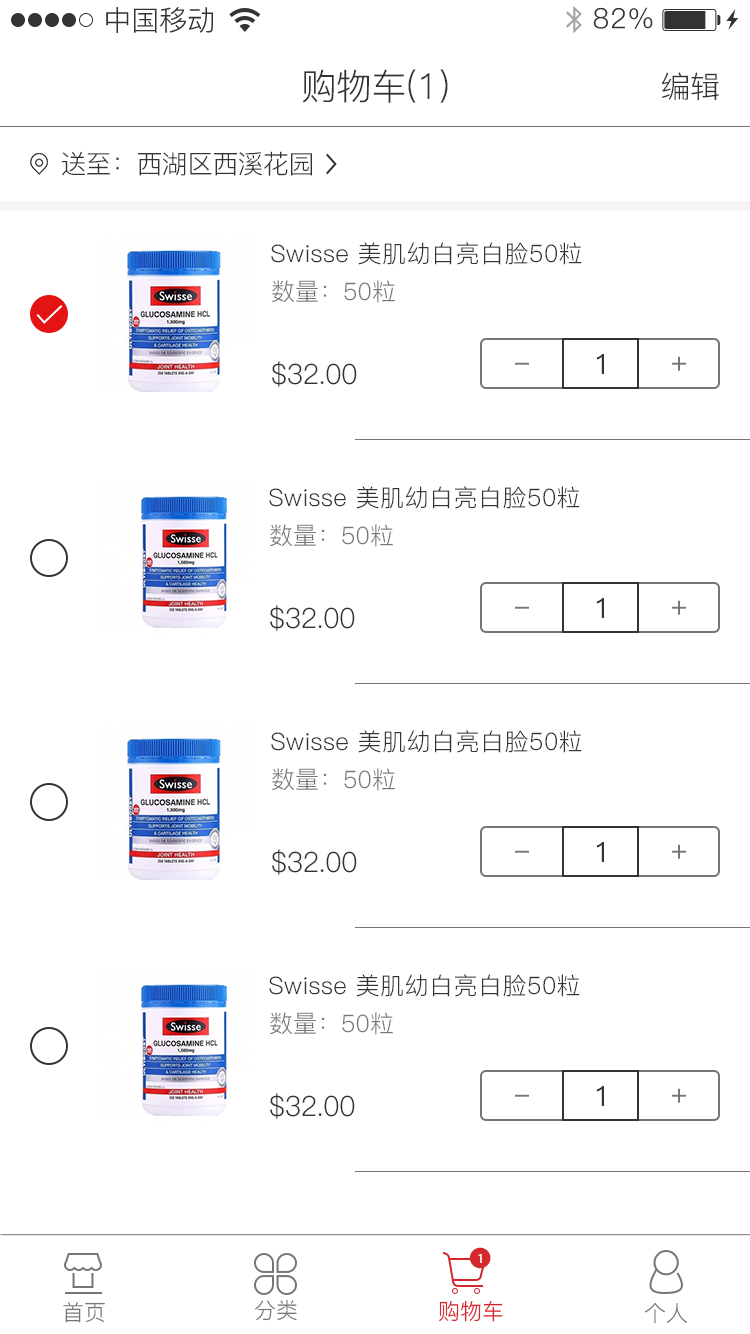
<style>
.page{position:relative;width:750px;height:1334px;background:#ffffff}
.page>*{position:absolute;margin:0}
.t1{font:28px "PingFang-SC-Regular";color:#333333}
.t2{font:28px "PingFang-SC-Regular";letter-spacing:0.025em;color:#333333}
.t3{font:36px "PingFang-SC-Regular";letter-spacing:-0.025em;color:#333333}
.t4{font:30px "PingFang-SC-Regular";letter-spacing:-0.025em;color:#333333}
.t5{font:26px "PingFang-SC-Regular";letter-spacing:-0.025em;color:#333333}
.t6{font:24px "PingFang-SC-Regular";letter-spacing:0.02em;color:#333333}
.t7{font:24px "PingFang-SC-Regular";color:#767676}
.t8{font:28px "PingFang-SC-Regular";letter-spacing:-0.025em;color:#333333}
.t9{font:28px "PingFang-SC-Medium";letter-spacing:-0.025em;color:#767676}
.t10{font:28px "PingFang-SC-Medium";letter-spacing:-0.025em;color:#333333}
.t11{font:12px "AdobeHeitiStd-Regular";color:#ffffff}
.t12{font:22px "PingFang-SC-Regular";color:#767676}
.t13{font:22px "PingFang-SC-Regular";color:#d5282e}
</style>
<div class="page">
<p class="t1" style="left:106px;top:7px;width:107px;height:26px">中国移动</p>
<p class="t2" style="left:593px;top:7px;width:60px;height:22px">82%</p>
<p class="t3" style="left:302px;top:69px;width:146px;height:34px">购物车(1)</p>
<p class="t4" style="left:662px;top:72px;width:57px;height:28px">编辑</p>
<p class="t5" style="left:62px;top:151px;width:250px;height:25px">送至：西湖区西溪花园</p>
<p class="t6" style="left:271px;top:242px;width:311px;height:23px">Swisse 美肌幼白亮白脸50粒</p>
<p class="t7" style="left:272px;top:280px;width:123px;height:23px">数量：50粒</p>
<p class="t8" style="left:272px;top:361px;width:85px;height:26px">$32.00</p>
<p class="t9" style="left:515px;top:362px;width:14px;height:3px">-</p>
<p class="t10" style="left:597px;top:354px;width:7px;height:20px">1</p>
<p class="t9" style="left:672px;top:356px;width:14px;height:15px">+</p>
<p class="t6" style="left:269px;top:486px;width:311px;height:23px">Swisse 美肌幼白亮白脸50粒</p>
<p class="t7" style="left:270px;top:524px;width:123px;height:23px">数量：50粒</p>
<p class="t8" style="left:270px;top:605px;width:85px;height:26px">$32.00</p>
<p class="t9" style="left:515px;top:606px;width:14px;height:3px">-</p>
<p class="t10" style="left:597px;top:598px;width:7px;height:20px">1</p>
<p class="t9" style="left:672px;top:600px;width:14px;height:15px">+</p>
<p class="t6" style="left:271px;top:730px;width:311px;height:23px">Swisse 美肌幼白亮白脸50粒</p>
<p class="t7" style="left:272px;top:768px;width:123px;height:23px">数量：50粒</p>
<p class="t10" style="left:597px;top:842px;width:7px;height:20px">1</p>
<p class="t9" style="left:672px;top:844px;width:14px;height:15px">+</p>
<p class="t8" style="left:272px;top:849px;width:85px;height:26px">$32.00</p>
<p class="t9" style="left:515px;top:850px;width:14px;height:3px">-</p>
<p class="t6" style="left:269px;top:974px;width:311px;height:23px">Swisse 美肌幼白亮白脸50粒</p>
<p class="t7" style="left:270px;top:1012px;width:123px;height:23px">数量：50粒</p>
<p class="t10" style="left:597px;top:1086px;width:7px;height:20px">1</p>
<p class="t8" style="left:270px;top:1093px;width:85px;height:26px">$32.00</p>
<p class="t9" style="left:515px;top:1094px;width:14px;height:3px">-</p>
<p class="t9" style="left:672px;top:1088px;width:14px;height:15px">+</p>
<p class="t11" style="left:478px;top:1254px;width:4px;height:9px">1</p>
<p class="t12" style="left:63px;top:1302px;width:42px;height:21px">首页</p>
<p class="t12" style="left:255px;top:1300px;width:42px;height:21px">分类</p>
<p class="t13" style="left:439px;top:1300px;width:64px;height:22px">购物车</p>
<p class="t12" style="left:645px;top:1303px;width:42px;height:21px">个人</p>
</div>
